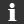
<style>
.page{position:relative;width:24px;height:24px;background:#333333}
.page>*{position:absolute;margin:0}
.t1{font:25px "Elephant-Regular";color:#ffffff}
</style>
<div class="page">
<p class="t1" style="left:8px;top:3px;width:9px;height:18px">i</p>
</div>
